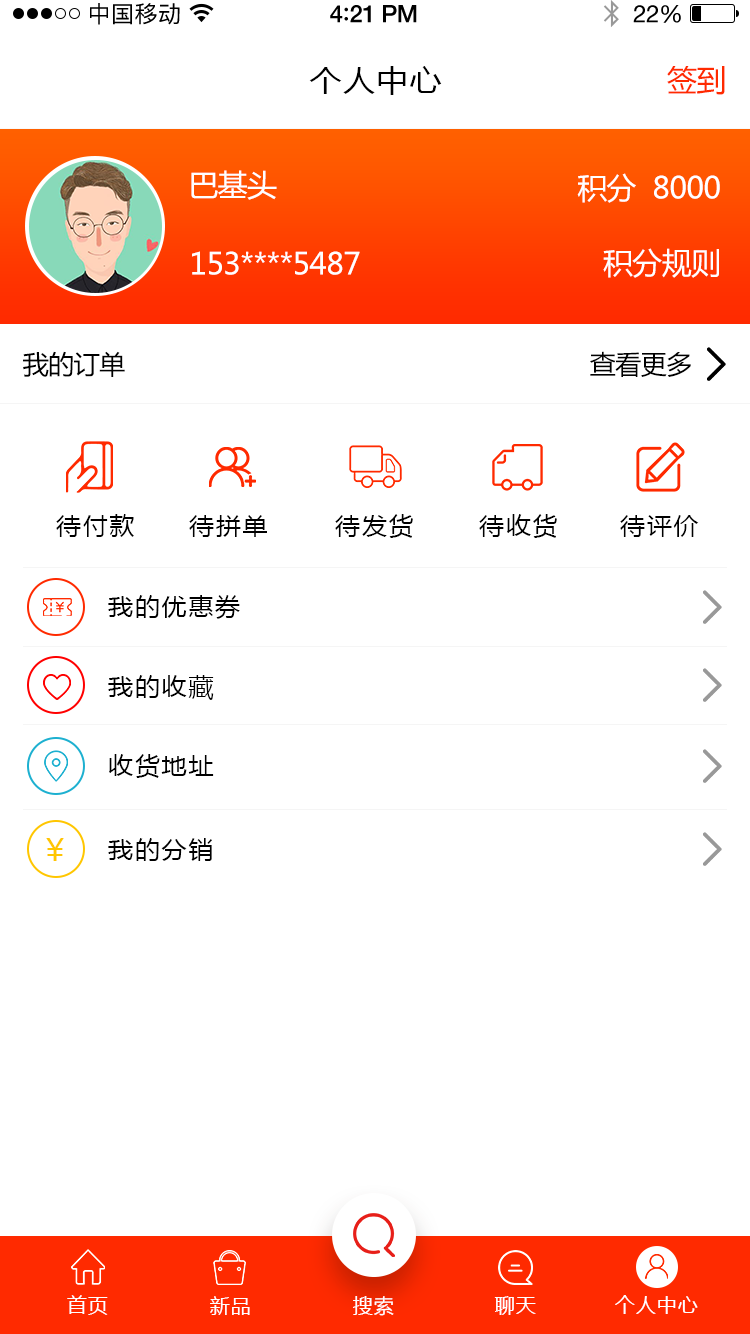
<style>
.page{position:relative;width:750px;height:1334px;background:#ffffff}
.page>*{position:absolute;margin:0}
.t1{font:23px "PingFangSC-Regular";letter-spacing:0.02em;color:#000000}
.t2{font:24px "HelveticaNeue-Medium";letter-spacing:-0.02em;color:#000000}
.t3{font:26px "Avenir-Medium";letter-spacing:-0.02em;color:#000000}
.t4{font:24px "HelveticaNeue";letter-spacing:-0.02em;color:#000000}
.t5{font:30px "MicrosoftYaHei";letter-spacing:0.05em;color:#000000;scale:1.06 1}
.t6{font:30px "MicrosoftYaHei";letter-spacing:-0.02em;color:#ff2a00}
.t7{font:30px "MicrosoftYaHei";letter-spacing:-0.02em;color:#ffffff}
.t8{font:26px "MicrosoftYaHei";letter-spacing:-0.02em;color:#000000}
.t9{font:24px "MicrosoftYaHei";letter-spacing:0.05em;color:#000000;scale:1.06 1}
.t10{font:30px "MicrosoftYaHei";letter-spacing:0.05em;color:#ffc600;scale:1.06 1}
.t11{font:20px "MicrosoftYaHei";letter-spacing:0.05em;color:#ffffff;text-transform:uppercase}
</style>
<div class="page">
<p class="t1" style="left:90px;top:3px;width:90px;height:22px">中国移动</p>
<p class="t2" style="left:330px;top:5px;width:87px;height:18px">4<span class="t3">:</span>21 PM</p>
<p class="t4" style="left:633px;top:5px;width:48px;height:18px">22%</p>
<p class="t5" style="left:309px;top:66px;width:133px;height:29px">个人中心</p>
<p class="t6" style="left:667px;top:66px;width:58px;height:29px">签到</p>
<p class="t7" style="left:191px;top:170px;width:86px;height:30px">巴基头</p>
<p class="t7" style="left:577px;top:173px;width:143px;height:30px">积分  8000</p>
<p class="t7" style="left:192px;top:251px;width:168px;height:24px">153****5487</p>
<p class="t7" style="left:603px;top:248px;width:116px;height:30px">积分规则</p>
<p class="t8" style="left:23px;top:351px;width:102px;height:26px">我的订单</p>
<p class="t8" style="left:590px;top:351px;width:101px;height:26px">查看更多</p>
<p class="t9" style="left:56px;top:514px;width:78px;height:23px">待付款</p>
<p class="t9" style="left:189px;top:515px;width:78px;height:22px">待拼单</p>
<p class="t9" style="left:335px;top:514px;width:78px;height:24px">待发货</p>
<p class="t9" style="left:479px;top:514px;width:78px;height:24px">待收货</p>
<p class="t9" style="left:620px;top:515px;width:79px;height:22px">待评价</p>
<p class="t9" style="left:108px;top:595px;width:132px;height:24px">我的优惠券</p>
<p class="t9" style="left:108px;top:675px;width:106px;height:25px">我的收藏</p>
<p class="t9" style="left:109px;top:754px;width:105px;height:24px">收货地址</p>
<p class="t10" style="left:46px;top:838px;width:18px;height:23px">￥</p>
<p class="t9" style="left:108px;top:838px;width:104px;height:23px">我的分销</p>
<p class="t11" style="left:67px;top:1295px;width:41px;height:20px">首页</p>
<p class="t11" style="left:210px;top:1296px;width:40px;height:19px">新品</p>
<p class="t11" style="left:353px;top:1296px;width:41px;height:20px">搜索</p>
<p class="t11" style="left:494px;top:1296px;width:42px;height:19px">聊天</p>
<p class="t11" style="left:615px;top:1295px;width:83px;height:19px">个人中心</p>
</div>
